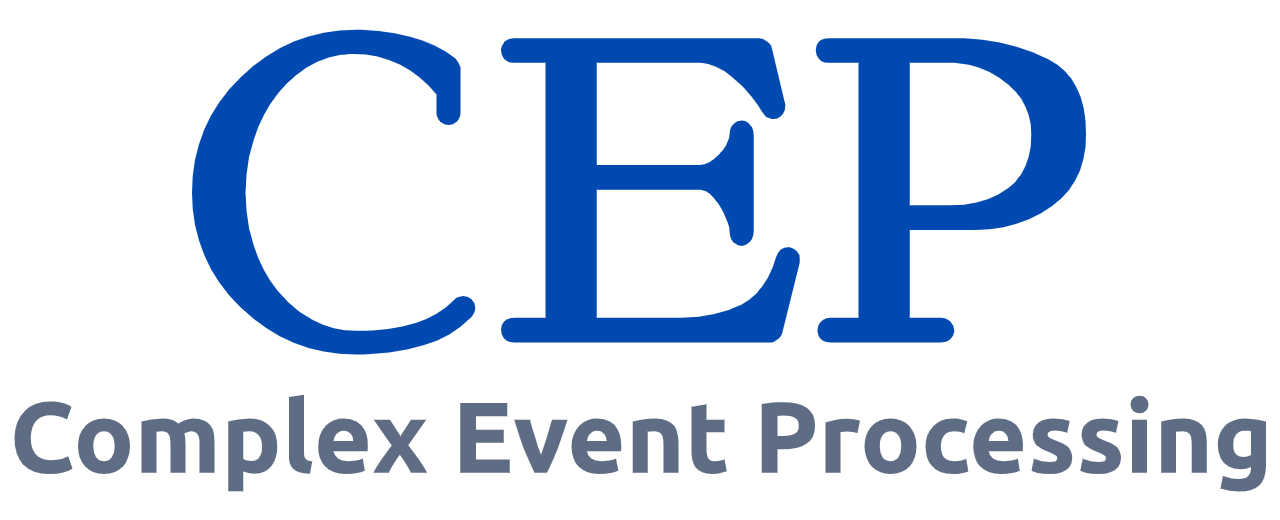
<style>
.page{position:relative;width:1280px;height:520px;background:#ffffff}
.page>*{position:absolute;margin:0}
.t1{font:446.6px "KelmscottRoman";color:#0049b0;scale:0.97 1}
.t2{font:100.6px "Ubuntu-Bold";color:#5e6c84}
</style>
<div class="page">
<p class="t1" style="left:192px;top:29px;width:894px;height:326px">CEP</p>
<p class="t2" style="left:14px;top:394px;width:1252px;height:98px">Complex Event Processing</p>
</div>
